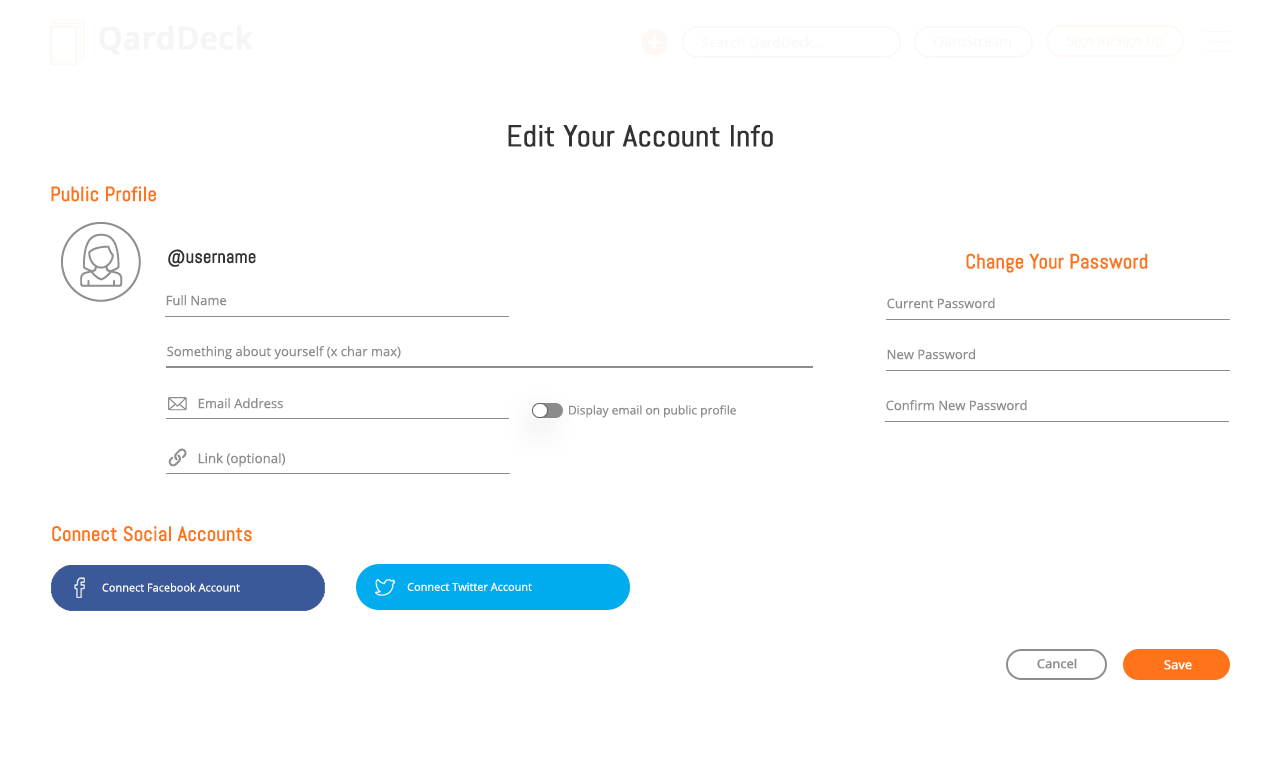
<style>
.page{position:relative;width:1280px;height:768px;background:#ffffff}
.page>*{position:absolute;margin:0}
.t1{font:30.9px "OpenSans-Semibold";color:#f5f5f5;font-weight:bold}
.t2{font:13px "OpenSans";color:#f9f9f9;font-weight:bold}
.t3{font:13px "OpenSans";color:#fff8f3;font-weight:bold}
.t4{font:30px "Abel-Regular";color:#323232;font-weight:bold}
.t5{font:20px "Abel-Regular";color:#ff741b;font-weight:bold}
.t6{font:18px "Abel-Regular";color:#323232;font-weight:bold}
.t7{font:13px "OpenSans";color:#8d8d8d}
.t8{font:12px "OpenSans";color:#8d8d8d}
.t9{font:13.3px "OpenSans";color:#8d8d8d}
.t10{font:11px "OpenSans";color:#ffffff}
.t11{font:12.2px "OpenSans";color:#8d8d8d;font-weight:bold}
.t12{font:12.2px "OpenSans";color:#ffffff;font-weight:bold}
</style>
<div class="page">
<p class="t1" style="left:99px;top:25px;width:154px;height:30px">QardDeck</p>
<p class="t2" style="left:702px;top:36px;width:122px;height:14px">Search QardDeck...</p>
<p class="t2" style="left:934px;top:35px;width:77px;height:14px">QardStream</p>
<p class="t3" style="left:1067px;top:35px;width:97px;height:14px">Sign in/Sign Up</p>
<p class="t4" style="left:508px;top:125px;width:265px;height:22px">Edit Your Account Info</p>
<p class="t5" style="left:51px;top:186px;width:105px;height:16px">Public Profile</p>
<p class="t6" style="left:168px;top:249px;width:88px;height:18px">@username</p>
<p class="t5" style="left:966px;top:253px;width:182px;height:20px">Change Your Password</p>
<p class="t7" style="left:166px;top:295px;width:61px;height:11px">Full Name</p>
<p class="t7" style="left:887px;top:298px;width:108px;height:11px">Current Password</p>
<p class="t7" style="left:167px;top:346px;width:234px;height:14px">Something about yourself (x char max)</p>
<p class="t7" style="left:887px;top:349px;width:88px;height:11px">New Password</p>
<p class="t7" style="left:198px;top:398px;width:85px;height:11px">Email Address</p>
<p class="t7" style="left:886px;top:400px;width:141px;height:11px">Confirm New Password</p>
<p class="t8" style="left:569px;top:405px;width:167px;height:13px">Display email on public profile</p>
<p class="t9" style="left:198px;top:453px;width:87px;height:14px">Link (optional)</p>
<p class="t5" style="left:52px;top:526px;width:200px;height:16px">Connect Social Accounts</p>
<p class="t10" style="left:407px;top:582px;width:125px;height:9px">Connect Twitter Account</p>
<p class="t10" style="left:102px;top:583px;width:138px;height:9px">Connect Facebook Account</p>
<p class="t11" style="left:1037px;top:658px;width:40px;height:11px">Cancel</p>
<p class="t12" style="left:1164px;top:660px;width:28px;height:10px">Save</p>
</div>
